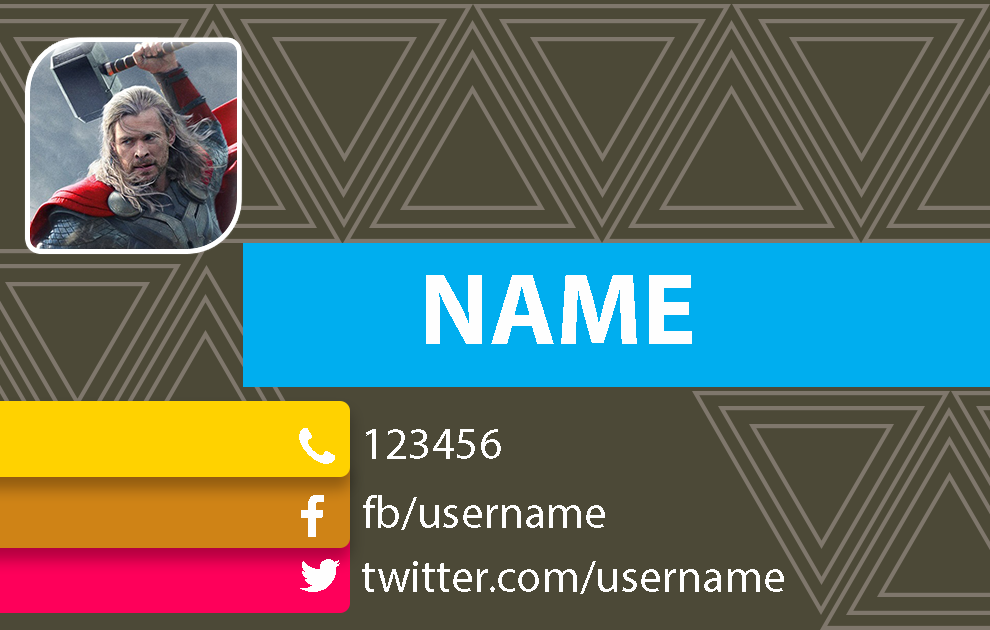
<style>
.page{position:relative;width:990px;height:630px;background:#4c4937}
.page>*{position:absolute;margin:0}
.t1{font:101.7px "MyriadPro-Bold";color:#fefefe}
.t2{font:45.8px "MyriadPro-Regular";color:#fefefe}
</style>
<div class="page">
<p class="t1" style="left:426px;top:275px;width:266px;height:69px">NAME</p>
<p class="t2" style="left:366px;top:429px;width:135px;height:30px">123456</p>
<p class="t2" style="left:363px;top:495px;width:242px;height:35px">fb/username</p>
<p class="t2" style="left:362px;top:561px;width:422px;height:33px">twitter.com/username</p>
</div>
